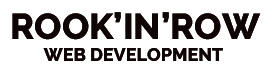
<style>
.page{position:relative;width:272px;height:69px;background:#ffffff}
.page>*{position:absolute;margin:0}
.t1{font:18px "Raleway-ExtraBold";color:#0f0505}
.t2{font:36px "Raleway-ExtraBold";color:#0f0505}
</style>
<div class="page">
<p class="t1" style="left:12px;top:12px;width:249px;height:49px"><span class="t2">ROOK’IN’ROW</span><br>        WEB DEVELOPMENT</p>
<p class="t1" style="left:12px;top:12px;width:249px;height:49px"><span class="t2">ROOK’IN’ROW</span><br>        WEB DEVELOPMENT</p>
</div>
